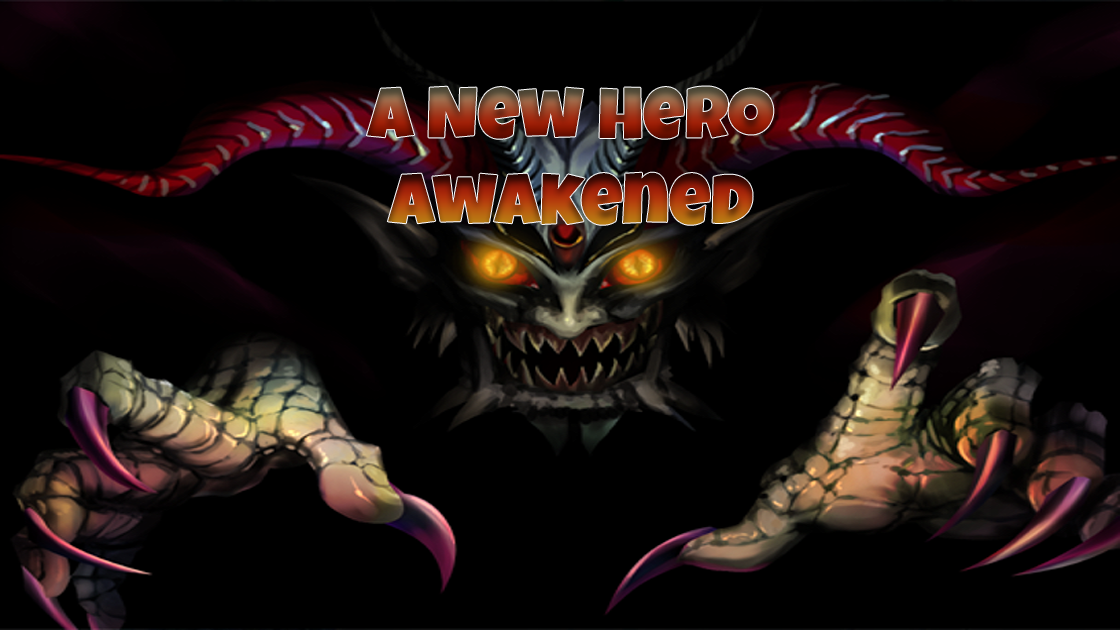
<style>
.page{position:relative;width:1120px;height:630px;background:#000000}
.page>*{position:absolute;margin:0}
.t1{font:72px "LuckiestGuy-Regular"}
</style>
<div class="page">
<p class="t1" style="left:366px;top:86px;width:408px;height:139px;text-align:center">A New Hero<br>Awakened</p>
</div>
